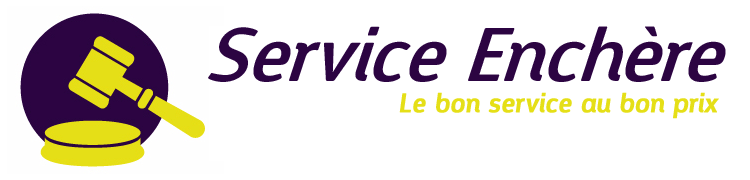
<style>
.page{position:relative;width:750px;height:180px;background:#ffffff}
.page>*{position:absolute;margin:0}
.t1{font:73.5px "Designosaur-Italic";color:#2c0442;font-style:italic}
.t2{font:26.1px "Designosaur-Italic";color:#e5df17;font-weight:bold}
</style>
<div class="page">
<p class="t1" style="left:208px;top:26px;width:518px;height:56px">Service Enchère</p>
<p class="t2" style="left:399px;top:92px;width:320px;height:27px">Le bon service au bon prix</p>
</div>
